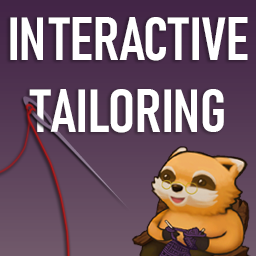
<style>
.page{position:relative;width:256px;height:256px}
.page>*{position:absolute;margin:0}
.t1{font:60px "Bahnschrift-SemiBoldCondensed";color:#ffffff;font-weight:bold}
</style>
<div class="page">
<p class="t1" style="left:10px;top:17px;width:238px;height:116px;text-align:center">INTERACTIVE TAILORING</p>
</div>
